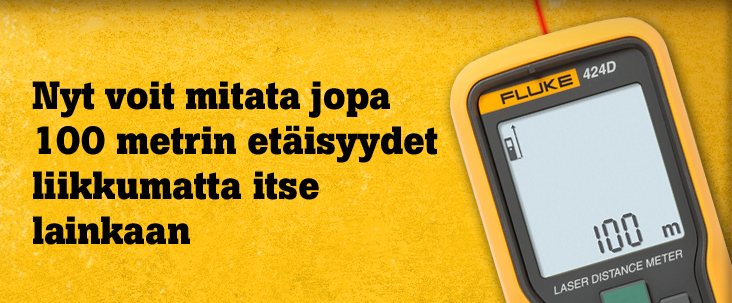
<style>
.page{position:relative;width:732px;height:303px}
.page>*{position:absolute;margin:0}
.t1{font:39px/45px "BotonPro-Bold";letter-spacing:-0.01em;color:#000000}
</style>
<div class="page">
<p class="t1" style="left:32px;top:81px;width:406px;height:164px">Nyt voit mitata jopa 100 metrin etäisyydet liikkumatta itse <br>lainkaan</p>
</div>
